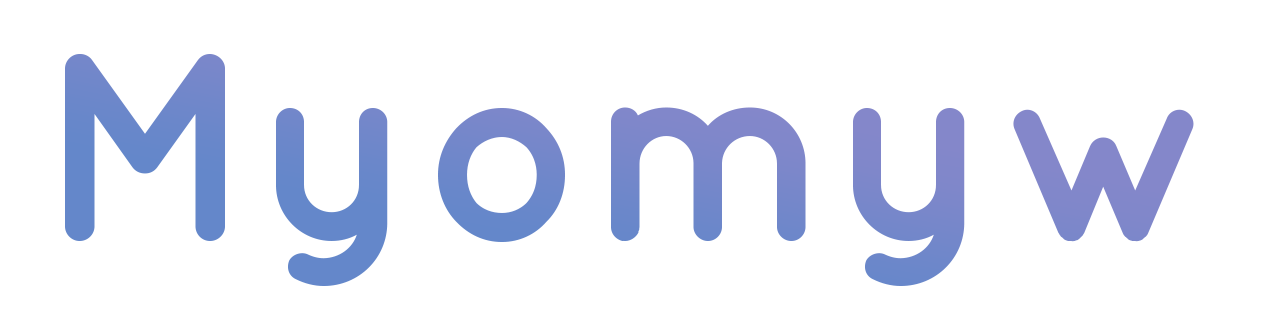
<style>
.page{position:relative;width:1265px;height:319px;background:#ffffff}
.page>*{position:absolute;margin:0}
.t1{font:266.7px "Quicksand-Bold";color:#7187ca}
</style>
<div class="page">
<p class="t1" style="left:65px;top:54px;width:1129px;height:232px">Myomyw</p>
</div>
